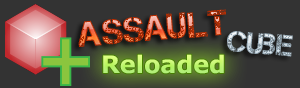
<style>
.page{position:relative;width:300px;height:88px;background:#333333}
.page>*{position:absolute;margin:0}
.t1{font:36px "Captureit"}
.t2{font:30px "Captureit"}
.t3{font:24px "Verdana-Bold";color:#bcf477}
</style>
<div class="page">
<p class="t1" style="left:78px;top:9px;width:148px;height:38px;rotate:-5deg">Assault</p>
<p class="t2" style="left:227px;top:31px;width:66px;height:26px;rotate:5deg">Cube</p>
<p class="t3" style="left:103px;top:54px;width:121px;height:20px">Reloaded</p>
</div>
